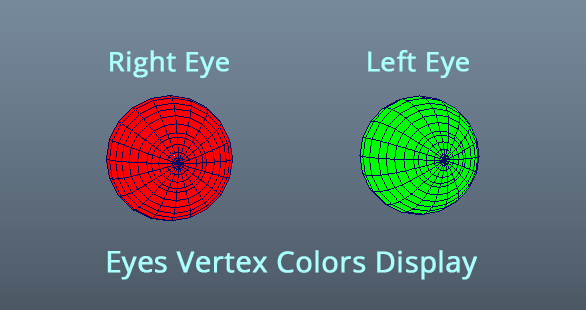
<style>
.page{position:relative;width:586px;height:310px}
.page>*{position:absolute;margin:0}
.t1{font:27.2px "OpenSans-Regular";color:#aaffff;font-weight:bold}
.t2{font:28.8px "OpenSans-Regular";color:#aaffff;font-weight:bold}
</style>
<div class="page">
<p class="t1" style="left:110px;top:50px;width:119px;height:28px">Right Eye</p>
<p class="t1" style="left:368px;top:50px;width:101px;height:28px">Left Eye</p>
<p class="t2" style="left:107px;top:250px;width:370px;height:30px">Eyes Vertex Colors Display</p>
</div>
